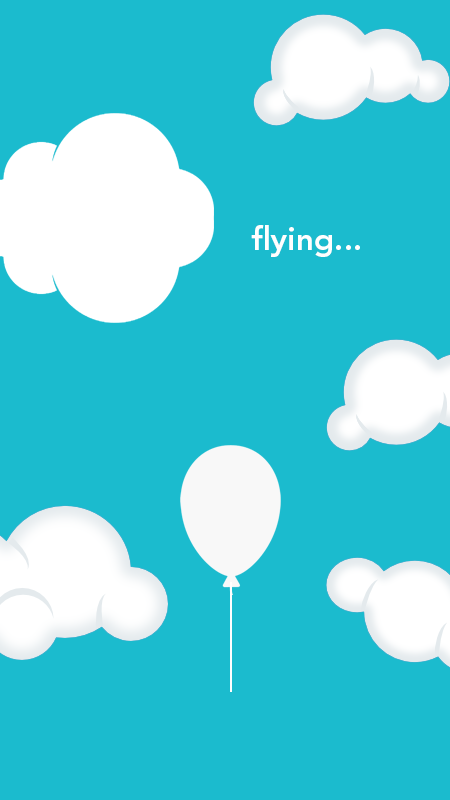
<style>
.page{position:relative;width:450px;height:800px;background:#1bbbce}
.page>*{position:absolute;margin:0}
.t1{font:32px "AvenirLTStd-Heavy";color:#ffffff}
</style>
<div class="page">
<p class="t1" style="left:251px;top:225px;width:109px;height:32px">flying...</p>
</div>
